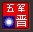
<style>
.page{position:relative;width:33px;height:32px;background:#f20000}
.page>*{position:absolute;margin:0}
.t1{font:10.4px "SimSun";color:#ffffff}
.t2{font:11.7px "SimSun";color:#ffffff}
</style>
<div class="page">
<p class="t1" style="left:7px;top:4px;width:18px;height:8px">五军</p>
<p class="t2" style="left:16px;top:15px;width:11px;height:12px">晋</p>
</div>
